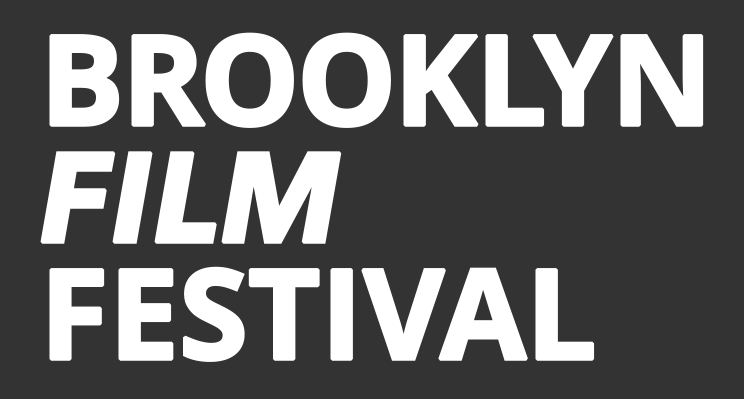
<style>
.page{position:relative;width:744px;height:399px;background:#333333}
.page>*{position:absolute;margin:0}
.t1{font:125px "OpenSans-Bold";letter-spacing:-0.01em;color:#ffffff;text-transform:uppercase;font-weight:bold}
.t2{font:125px "AvenirNext-BoldItalic";letter-spacing:-0.01em;color:#ffffff;text-transform:uppercase;font-weight:bold}
</style>
<div class="page">
<p class="t1" style="left:49px;top:32px;width:655px;height:96px">Brooklyn</p>
<p class="t2" style="left:40px;top:151px;width:302px;height:93px">FILM</p>
<p class="t1" style="left:49px;top:266px;width:546px;height:96px">Festival</p>
</div>
